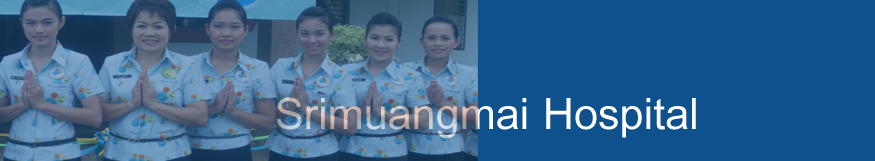
<style>
.page{position:relative;width:875px;height:161px;background:#0f518c}
.page>*{position:absolute;margin:0}
.t1{font:48px "Miriam"}
</style>
<div class="page">
<p class="t1" style="left:277px;top:97px;width:419px;height:41px">Srimuangmai Hospital</p>
</div>
